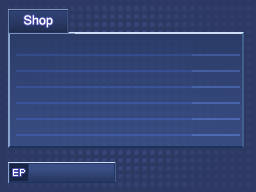
<style>
.page{position:relative;width:256px;height:192px;background:#2d3963}
.page>*{position:absolute;margin:0}
.t1{font:20px "Kartika";color:#ffffff}
.t2{font:16px "Kartika";color:#ffffff}
</style>
<div class="page">
<p class="t1" style="left:24px;top:15px;width:29px;height:13px">Shop</p>
<p class="t2" style="left:13px;top:169px;width:12px;height:7px">EP</p>
</div>
